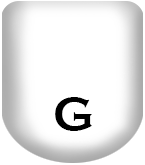
<style>
.page{position:relative;width:145px;height:165px;background:#ffffff}
.page>*{position:absolute;margin:0}
.t1{font:48px "CopperplateGothic-Bold";color:#000000}
</style>
<div class="page">
<p class="t1" style="left:55px;top:97px;width:37px;height:34px">G</p>
</div>
